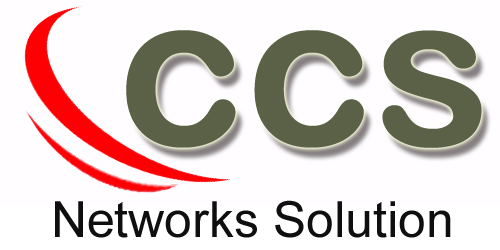
<style>
.page{position:relative;width:500px;height:250px;background:#fffdff}
.page>*{position:absolute;margin:0}
.t1{font:50px "ArialMT";color:#100f0f}
</style>
<div class="page">
<p class="t1" style="left:55px;top:200px;width:396px;height:38px">Networks Solution</p>
</div>
